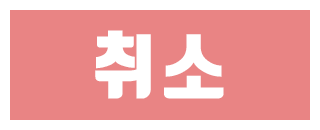
<style>
.page{position:relative;width:320px;height:130px;background:#e98484}
.page>*{position:absolute;margin:0}
.t1{font:70px "TmonMonsoriBlack";letter-spacing:0.1em;color:#ffffff}
</style>
<div class="page">
<p class="t1" style="left:95px;top:30px;width:129px;height:69px">취소</p>
</div>
